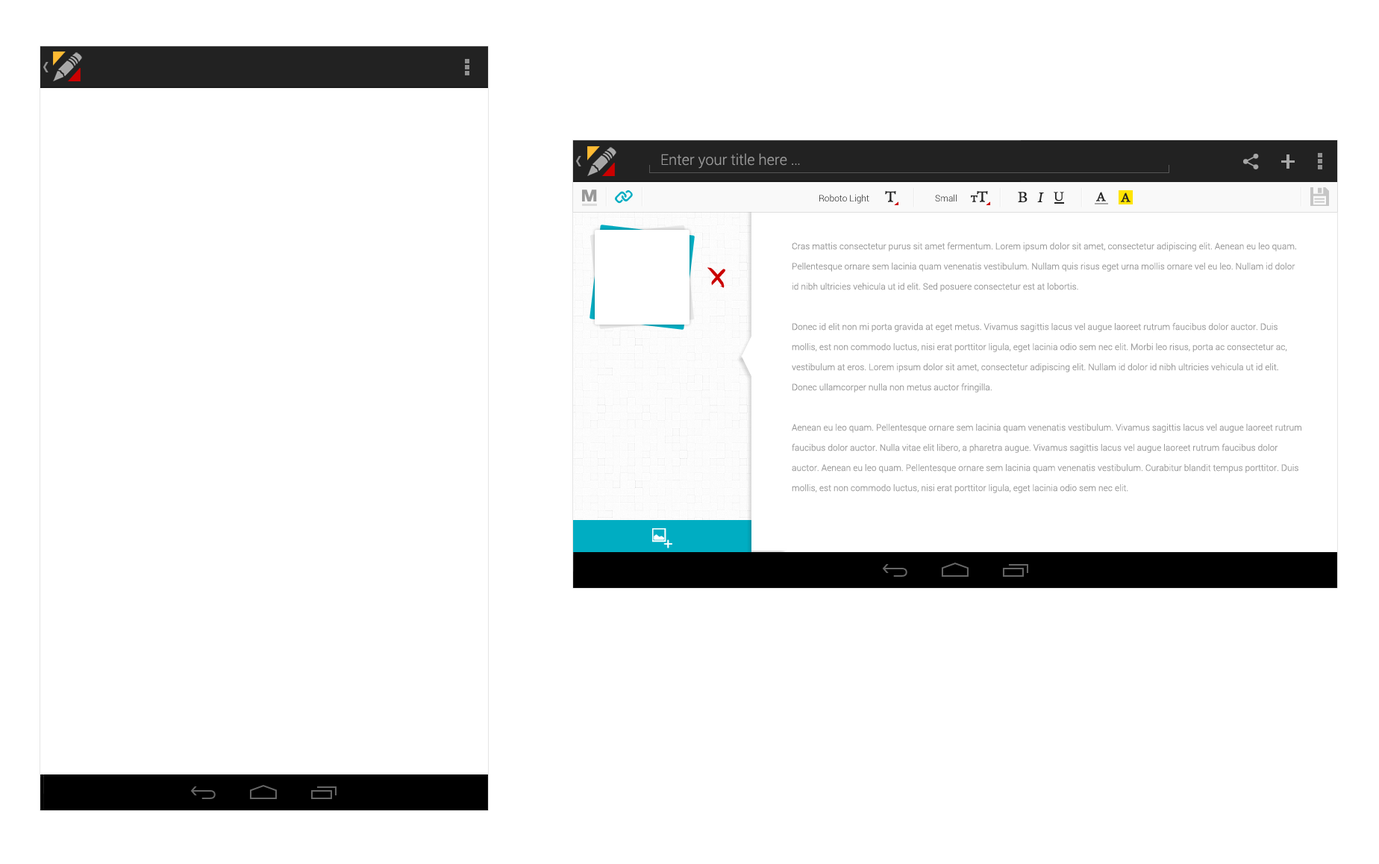
<style>
.page{position:relative;width:1379px;height:864px;background:#ffffff}
.page>*{position:absolute;margin:0}
.t1{font:14.9px "Roboto-Light";color:#999999}
.t2{font:26.9px "Roboto-Regular";color:#a7a7a7}
.t3{font:17.9px "Colaborate-Bold";color:#999999}
.t4{font:9px "Roboto-Light"}
.t5{font:14.9px "PoynterText-RomanThree";color:#222222}
.t6{font:9px "PoynterText-RomanThree";color:#222222;font-weight:bold}
.t7{font:14.2px "PoynterText-RomanThree";color:#222222;font-style:italic}
.t8{font:12.7px "PoynterText-RomanThree";color:#222222}
.t9{font:9px/20.2px "Roboto-Light";color:#999999}
.t10{font:53.7px "NanumBrush";color:#ca0000}
</style>
<div class="page">
<p class="t1" style="left:661px;top:153px;width:139px;height:16px">Enter your title here …</p>
<p class="t2" style="left:1282px;top:155px;width:13px;height:14px">+</p>
<p class="t3" style="left:582px;top:190px;width:15px;height:12px">M</p>
<p class="t4" style="left:820px;top:194px;width:50px;height:10px">Roboto Light</p>
<p class="t5" style="left:885px;top:191px;width:12px;height:11px">T</p>
<p class="t4" style="left:935px;top:194px;width:22px;height:8px">Small</p>
<p class="t6" style="left:971px;top:195px;width:7px;height:7px">T</p>
<p class="t5" style="left:977px;top:191px;width:11px;height:11px">T</p>
<p class="t5" style="left:1018px;top:192px;width:10px;height:10px">B</p>
<p class="t7" style="left:1038px;top:193px;width:6px;height:9px">I</p>
<p class="t8" style="left:1054px;top:192px;width:10px;height:10px">U</p>
<p class="t8" style="left:1097px;top:192px;width:9px;height:10px">A</p>
<p class="t8" style="left:1121px;top:193px;width:10px;height:9px">A</p>
<p class="t9" style="left:792px;top:242px;width:510px;height:251px">Cras mattis consectetur purus sit amet fermentum. Lorem ipsum dolor sit amet, consectetur adipiscing elit. Aenean eu leo quam. Pellentesque ornare sem lacinia quam venenatis vestibulum. Nullam quis risus eget urna mollis ornare vel eu leo. Nullam id dolor id nibh ultricies vehicula ut id elit. Sed posuere consectetur est at lobortis.<br><br>Donec id elit non mi porta gravida at eget metus. Vivamus sagittis lacus vel augue laoreet rutrum faucibus dolor auctor. Duis mollis, est non commodo luctus, nisi erat porttitor ligula, eget lacinia odio sem nec elit. Morbi leo risus, porta ac consectetur ac, vestibulum at eros. Lorem ipsum dolor sit amet, consectetur adipiscing elit. Nullam id dolor id nibh ultricies vehicula ut id elit. Donec ullamcorper nulla non metus auctor fringilla.<br><br>Aenean eu leo quam. Pellentesque ornare sem lacinia quam venenatis vestibulum. Vivamus sagittis lacus vel augue laoreet rutrum faucibus dolor auctor. Nulla vitae elit libero, a pharetra augue. Vivamus sagittis lacus vel augue laoreet rutrum faucibus dolor auctor. Aenean eu leo quam. Pellentesque ornare sem lacinia quam venenatis vestibulum. Curabitur blandit tempus porttitor. Duis mollis, est non commodo luctus, nisi erat porttitor ligula, eget lacinia odio sem nec elit.</p>
<p class="t10" style="left:708px;top:267px;width:18px;height:21px;rotate:180deg">x</p>
</div>
